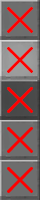
<style>
.page{position:relative;width:40px;height:200px;background:#6e6e6e}
.page>*{position:absolute;margin:0}
.t1{font:42px "GenSenRoundedTW-R";color:#ff0000}
</style>
<div class="page">
<p class="t1" style="left:7px;top:7px;width:26px;height:26px">×</p>
<p class="t1" style="left:7px;top:47px;width:26px;height:26px">×</p>
<p class="t1" style="left:7px;top:87px;width:26px;height:26px">×</p>
</div>
